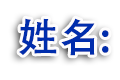
<style>
.page{position:relative;width:120px;height:80px;background:#ffffff}
.page>*{position:absolute;margin:0}
.t1{font:40px "AdobeHeitiStd-Regular";color:#002dac;font-weight:bold}
</style>
<div class="page">
<p class="t1" style="left:19px;top:18px;width:90px;height:38px">姓名:</p>
</div>
